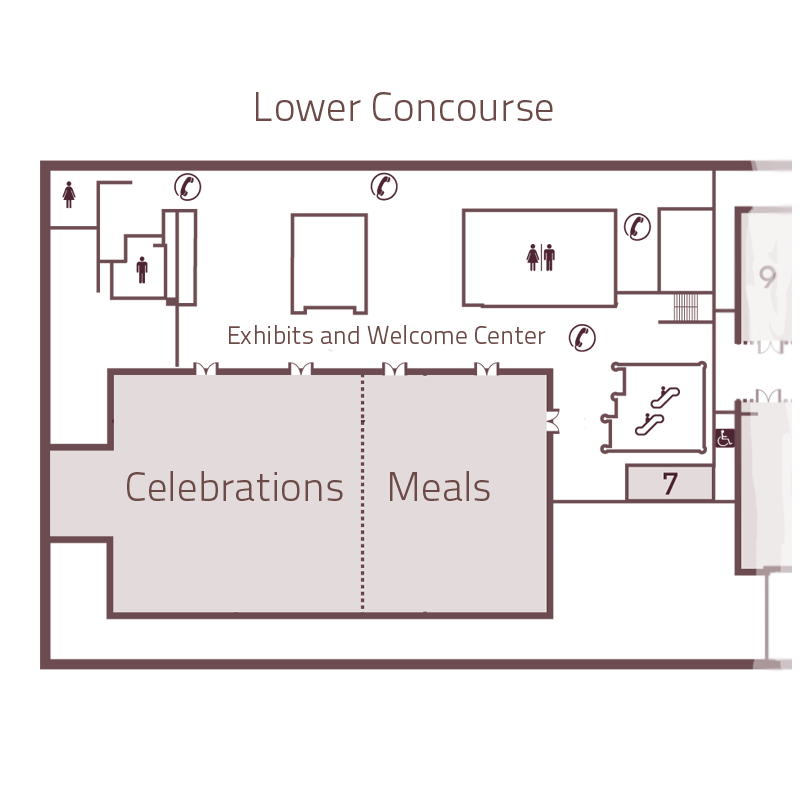
<style>
.page{position:relative;width:800px;height:800px;background:#ffffff}
.page>*{position:absolute;margin:0}
.t1{font:40.9px "TitilliumText25L-250wt";color:#6b4a48}
.t2{font:25.4px "TitilliumText25L-250wt";color:#6b4a48}
</style>
<div class="page">
<p class="t1" style="left:256px;top:92px;width:297px;height:29px">Lower Concourse</p>
<p class="t2" style="left:229px;top:325px;width:317px;height:20px">Exhibits and Welcome Center</p>
<p class="t1" style="left:127px;top:471px;width:216px;height:30px">Celebrations</p>
<p class="t1" style="left:390px;top:471px;width:100px;height:30px">Meals</p>
</div>
